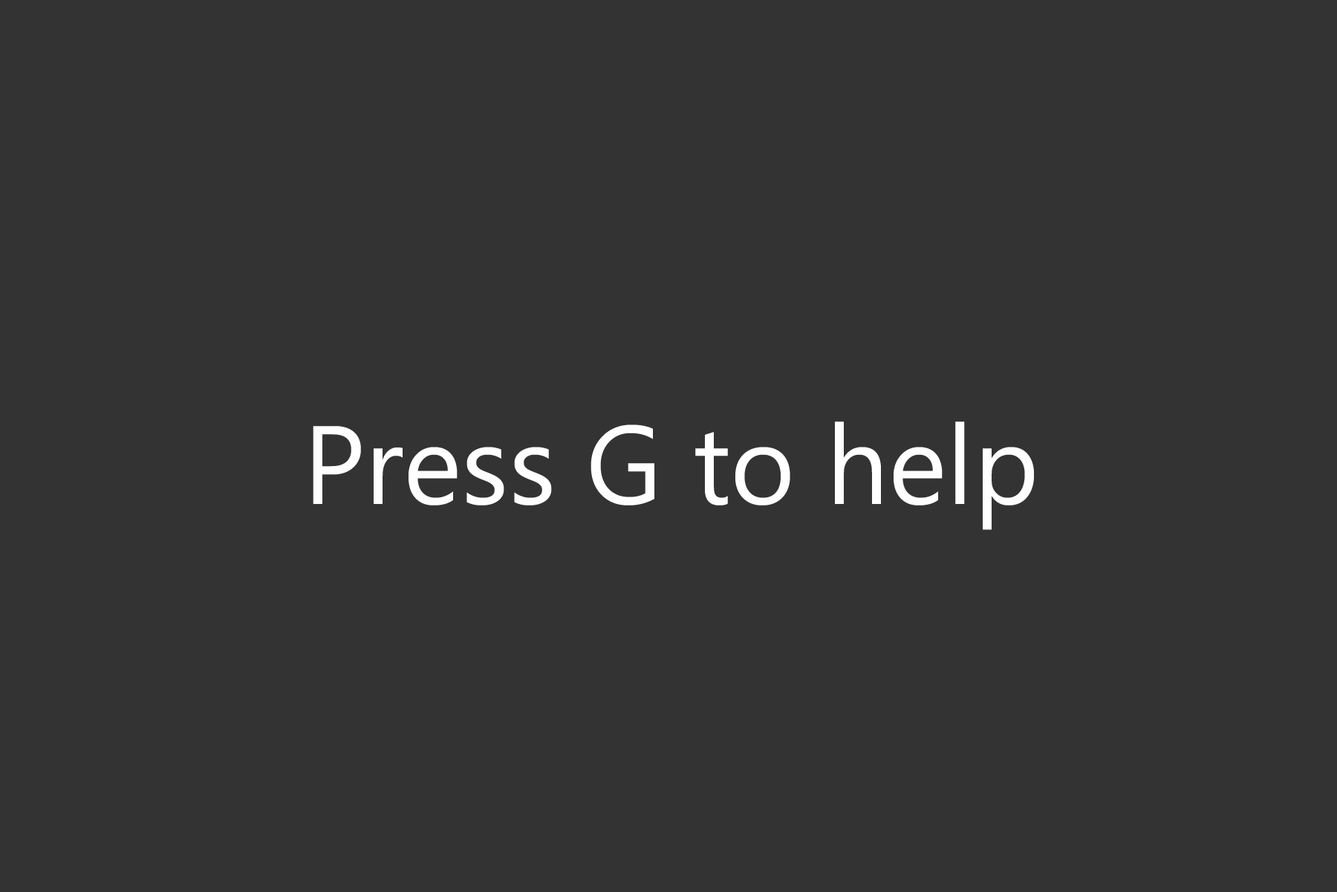
<style>
.page{position:relative;width:1337px;height:892px;background:#333333}
.page>*{position:absolute;margin:0}
.t1{font:111px "NirmalaUI";color:#ffffff}
</style>
<div class="page">
<p class="t1" style="left:313px;top:421px;width:721px;height:109px">Press G to help</p>
</div>
